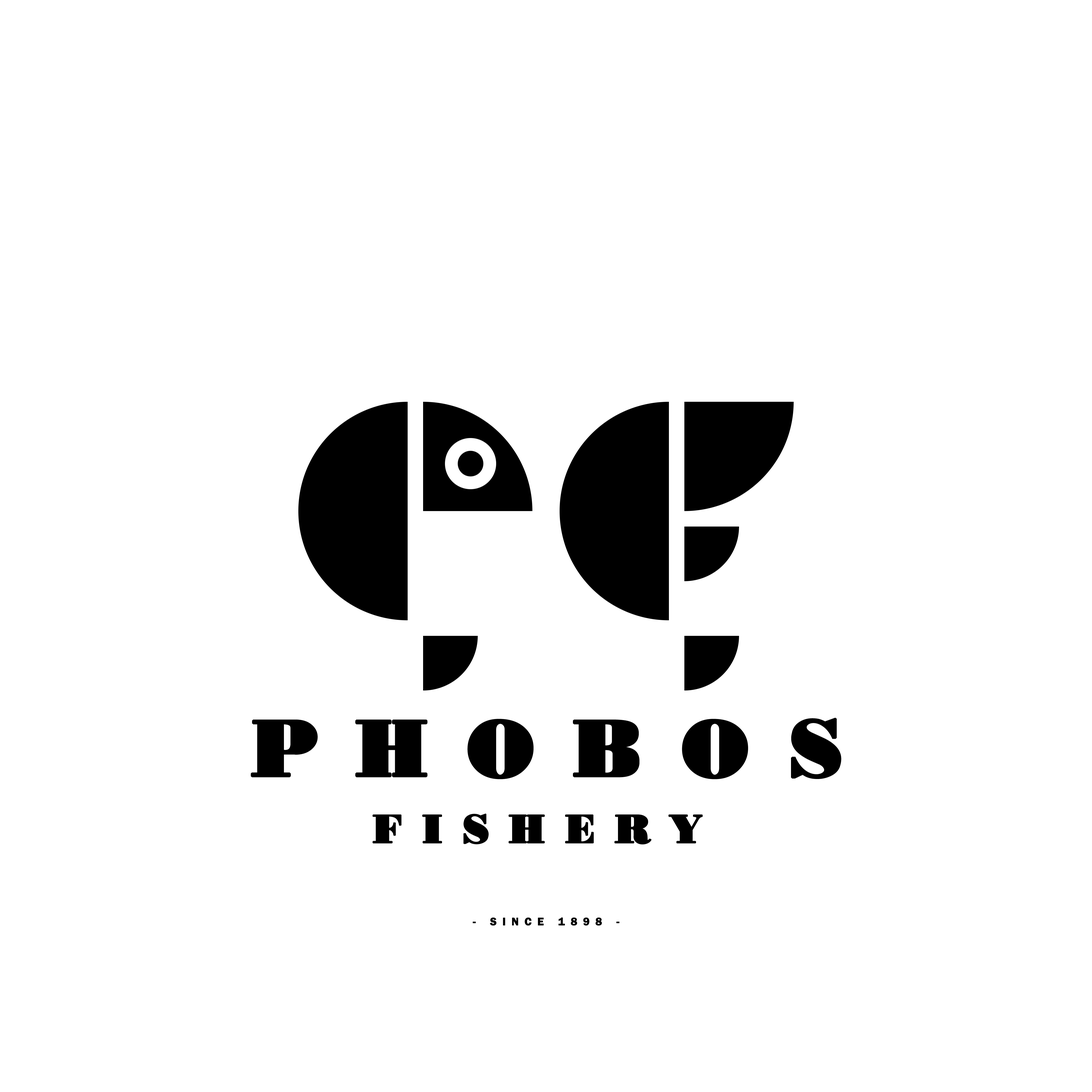
<style>
.page{position:relative;width:1092px;height:1092px;background:#ffffff}
.page>*{position:absolute;margin:0}
.t1{font:40px/66.6px "Bodoni-ExtraBold-Bold";letter-spacing:0.5em;color:#000000;font-weight:bold}
.t2{font:80px/66.6px "Bodoni-ExtraBold-Bold";letter-spacing:0.5em;color:#000000;font-weight:bold}
.t3{font:11.1px "FranklinGothic-Demi";letter-spacing:0.5em;color:#000000;font-weight:bold}
</style>
<div class="page">
<p class="t1" style="left:251px;top:718px;width:590px;height:127px;text-align:center"><span class="t2">PHOBOS<br></span>FISHERY</p>
<p class="t3" style="left:473px;top:917px;width:147px;height:9px">- SINCE 1898 -</p>
</div>
